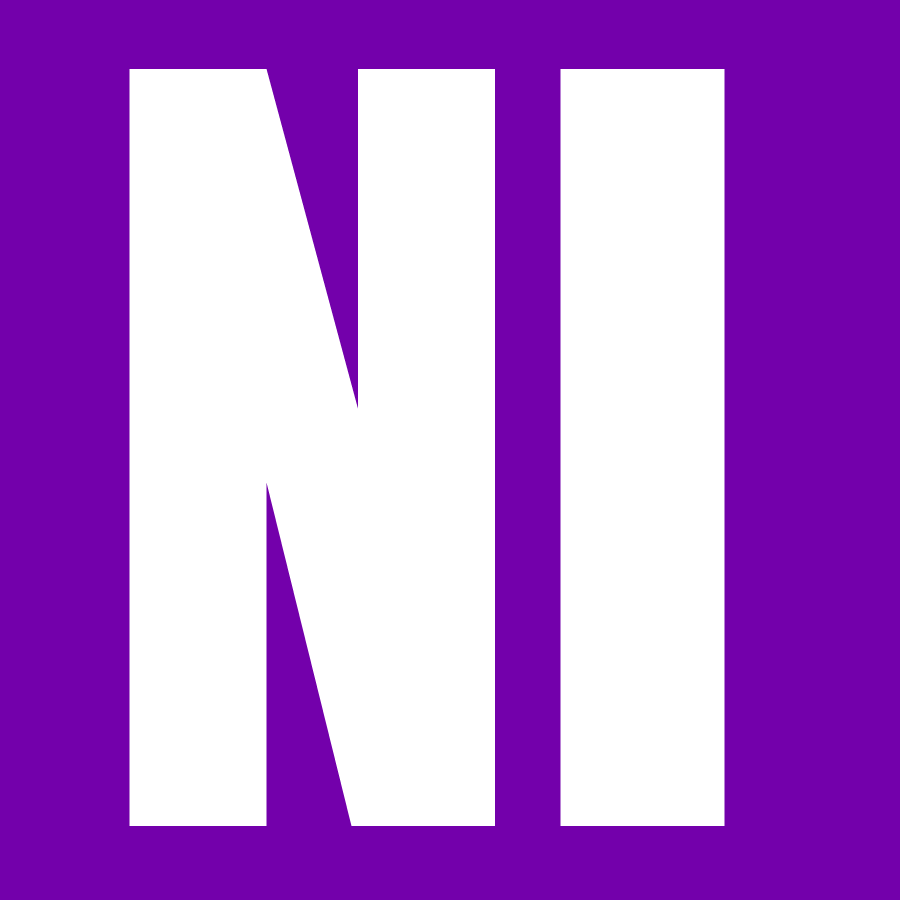
<style>
.page{position:relative;width:900px;height:900px;background:#7300ab}
.page>*{position:absolute;margin:0}
.t1{font:958.3px "Impact";color:#ffffff;scale:0.83 1}
</style>
<div class="page">
<p class="t1" style="left:129px;top:69px;width:596px;height:757px">NI</p>
</div>
